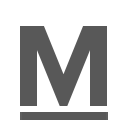
<style>
.page{position:relative;width:128px;height:128px;background:#ffffff}
.page>*{position:absolute;margin:0}
.t1{font:120px "ProximaNova-Bold";color:#585858}
</style>
<div class="page">
<p class="t1" style="left:20px;top:26px;width:87px;height:80px">M</p>
</div>
